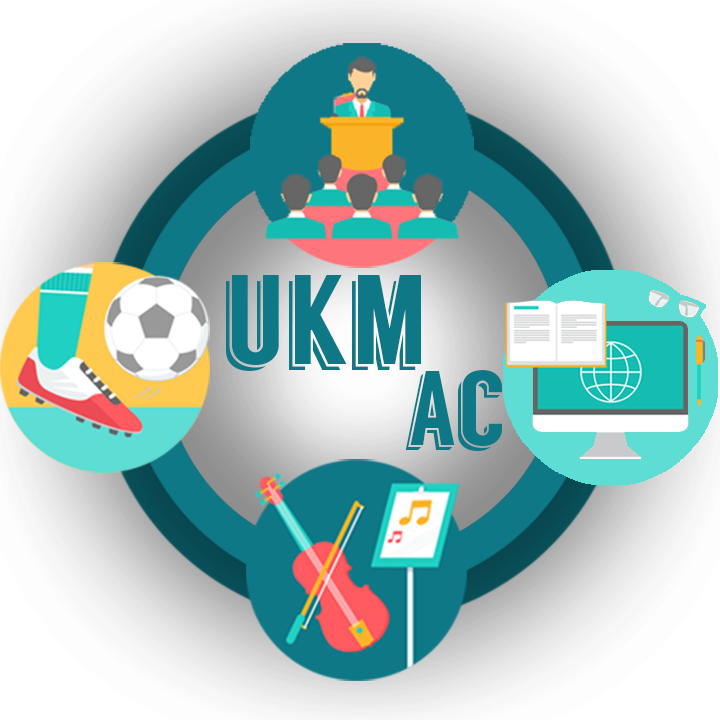
<style>
.page{position:relative;width:720px;height:720px}
.page>*{position:absolute;margin:0}
.t1{font:126.6px "Langdon";color:#0e7886}
.t2{font:105.5px "Langdon";color:#0e7886}
</style>
<div class="page">
<p class="t1" style="left:226px;top:275px;width:195px;height:96px">ukm</p>
<p class="t2" style="left:405px;top:370px;width:97px;height:81px">ac</p>
</div>
